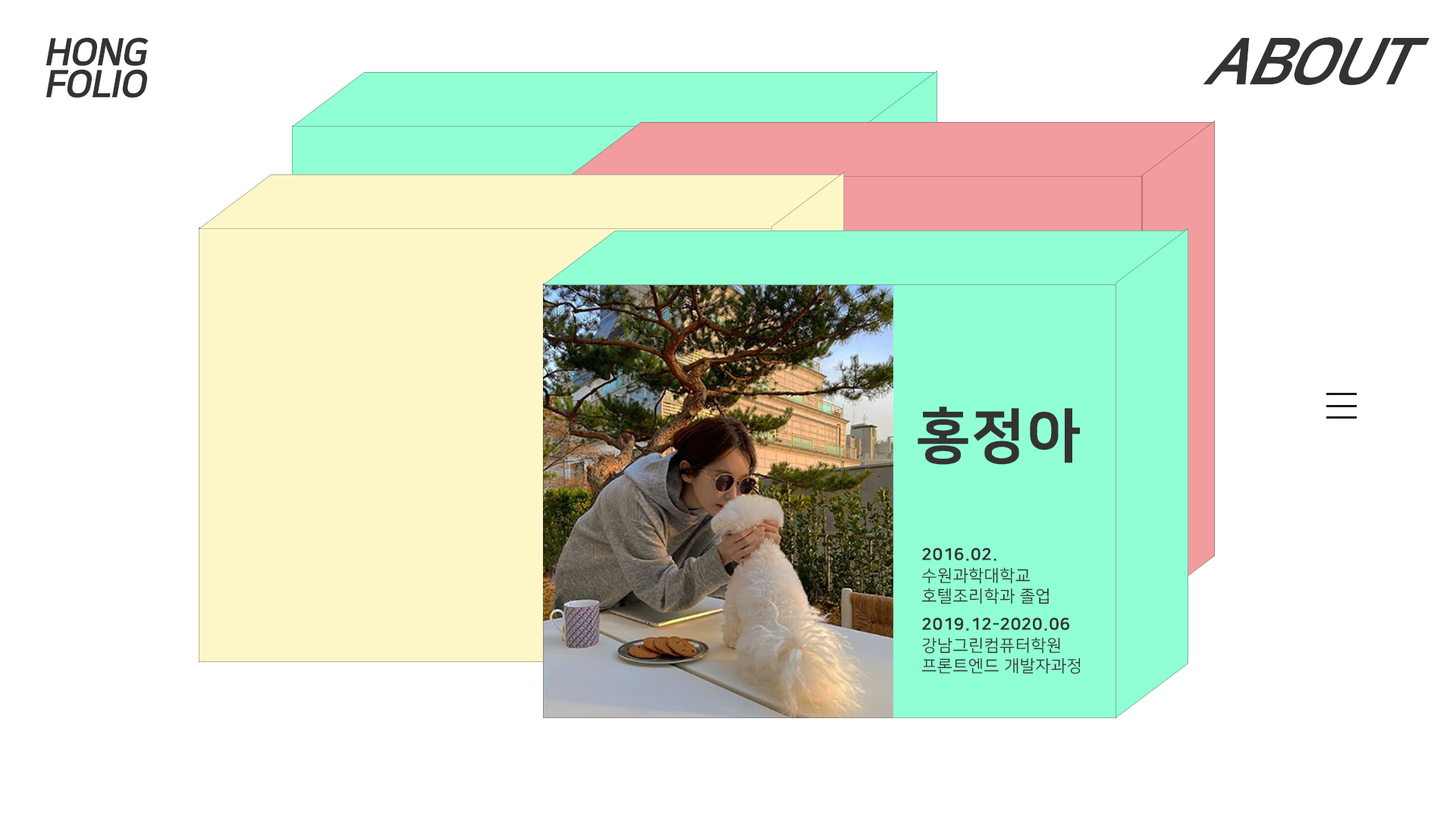
<style>
.page{position:relative;width:1456px;height:819px;background:#ffffff}
.page>*{position:absolute;margin:0}
.t1{font:37.9px/31.9px "NanumSquareEB";letter-spacing:-0.035em;color:#333333;font-style:italic}
.t2{font:70.8px "NanumSquareEB";letter-spacing:-0.035em;color:#333333;scale:0.91 1}
.t3{font:58.7px "NanumSquareEB";letter-spacing:0.025em;color:#333333}
.t4{font:16.6px/20.7px "NanumSquareR";letter-spacing:0.025em;color:#333333}
.t5{font:16.6px/20.7px "NanumSquareEB";letter-spacing:0.025em;color:#333333}
</style>
<div class="page">
<p class="t1" style="left:45px;top:37px;width:104px;height:61px">HONG<br>FOLIO</p>
<p class="t2" style="left:1203px;top:37px;width:226px;height:49px">ABOUT</p>
<p class="t3" style="left:918px;top:406px;width:162px;height:59px">홍정아</p>
<p class="t4" style="left:921px;top:548px;width:128px;height:56px"><span class="t5">2016.02.<br></span>수원과학대학교<br>호텔조리학과 졸업</p>
<p class="t4" style="left:921px;top:617px;width:160px;height:57px"><span class="t5">2019.12-2020.06<br></span>강남그린컴퓨터학원<br>프론트엔드 개발자과정</p>
</div>
